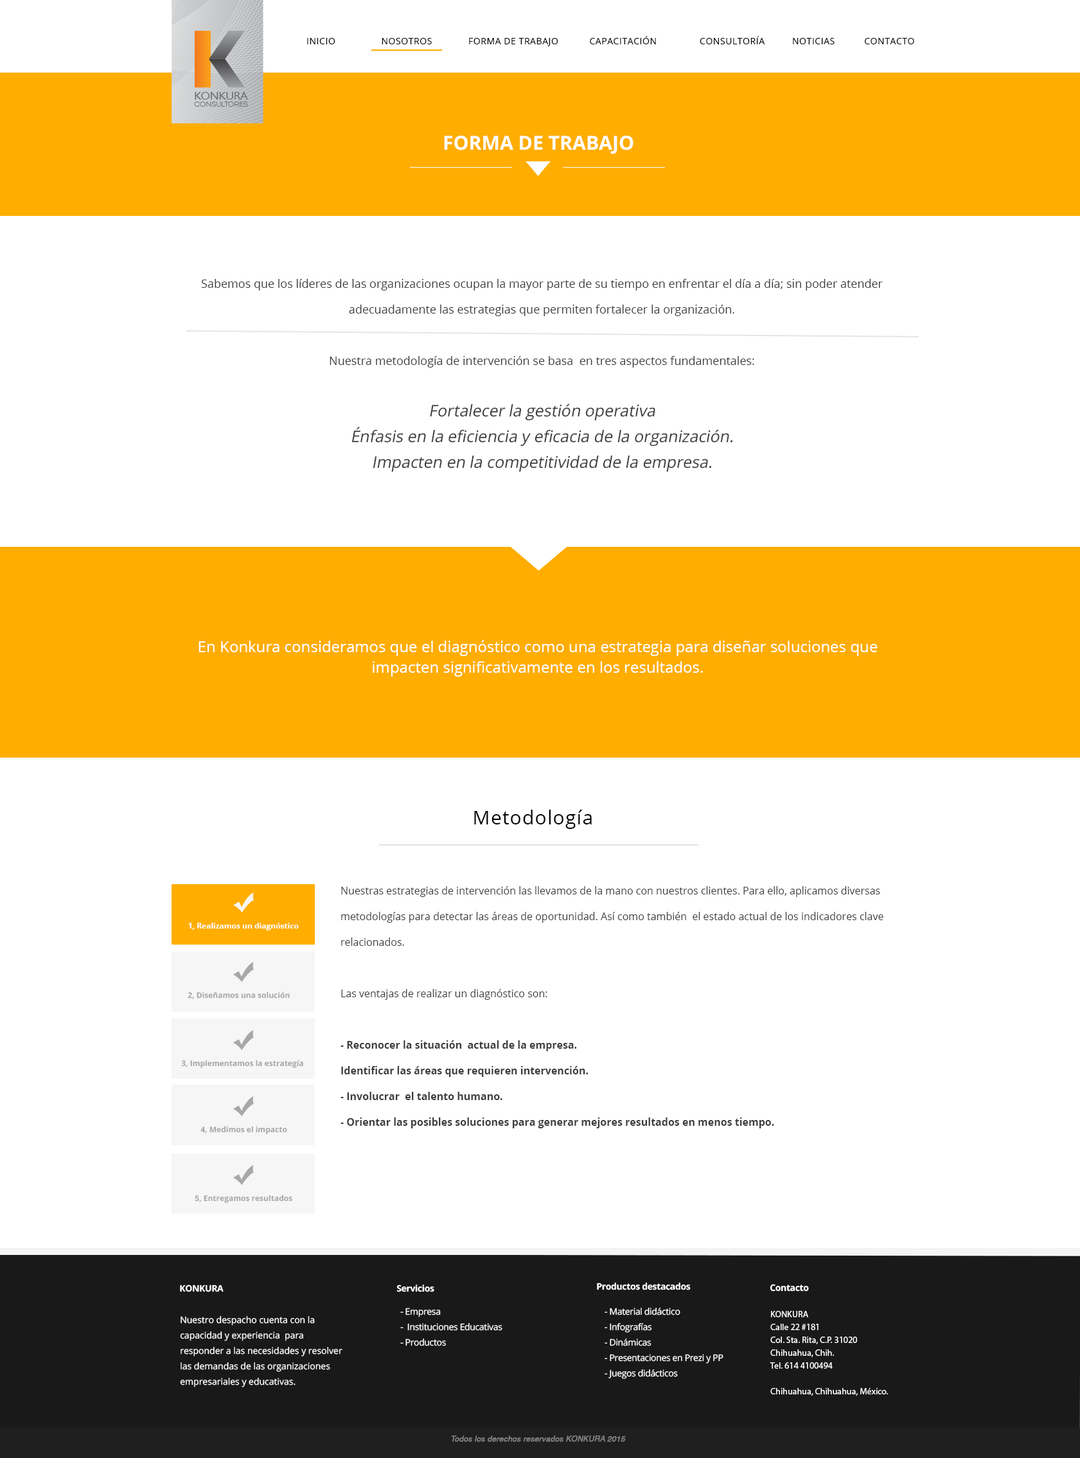
<style>
.page{position:relative;width:1080px;height:1458px;background:#ffffff}
.page>*{position:absolute;margin:0}
.t1{font:9px "OpenSans";letter-spacing:0.04em;color:#000000}
.t2{font:19.3px "OpenSans-Bold";color:#ffffff}
.t3{font:11.6px/25.7px "OpenSans";color:#3e3e3e}
.t4{font:16.1px/25.7px "OpenSans";color:#3e3e3e;font-style:italic}
.t5{font:15.4px/20.4px "OpenSans";color:#ffffff}
.t6{font:19.3px "OpenSans";letter-spacing:0.04em;color:#000000}
.t7{font:10.3px/25.7px "OpenSans";color:#3e3e3e}
.t8{font:10.3px/25.7px "OpenSans-Bold";color:#3e3e3e}
.t9{font:7.7px "OpenSans-Bold";color:#ffffff}
.t10{font:7.8px "OpenSans-Bold";color:#a8a8a8}
.t11{font:9px "OpenSans-Bold";letter-spacing:-0.025em;color:#ffffff}
.t12{font:9px/15.4px "OpenSans";letter-spacing:-0.025em;color:#ffffff}
.t13{font:9px/12.9px "MyriadPro-Regular";color:#ffffff}
.t14{font:9px/15.4px "OpenSans";color:#ffffff}
.t15{font:7.7px "Helvetica-Oblique";color:#818181;font-weight:bold}
</style>
<div class="page">
<p class="t1" style="left:307px;top:36px;width:607px;height:10px">INICIO       NOSOTROS  FORMA DE TRABAJO    CAPACITACIÓN  CONSULTORÍA   NOTICIAS   CONTACTO</p>
<p class="t2" style="left:444px;top:136px;width:190px;height:18px">FORMA DE TRABAJO</p>
<p class="t3" style="left:201px;top:279px;width:682px;height:193px;text-align:center">Sabemos que los líderes de las organizaciones ocupan la mayor parte de su tiempo en enfrentar el día a día; sin poder atender adecuadamente las estrategias que permiten fortalecer la organización.<br><br>Nuestra metodología de intervención se basa  en tres aspectos fundamentales:<br><br><span class="t4">Fortalecer la gestión operativa<br>Énfasis en la eficiencia y eficacia de la organización.<br>Impacten en la competitividad de la empresa.</span></p>
<p class="t5" style="left:199px;top:640px;width:679px;height:37px;text-align:center">En Konkura consideramos que el diagnóstico como una estrategia para diseñar soluciones que impacten significativamente en los resultados.</p>
<p class="t6" style="left:474px;top:810px;width:118px;height:19px">Metodología</p>
<p class="t7" style="left:341px;top:886px;width:543px;height:242px">Nuestras estrategias de intervención las llevamos de la mano con nuestros clientes. Para ello, aplicamos diversas metodologías para detectar las áreas de oportunidad. Así como también  el estado actual de los indicadores clave relacionados. <br><br>Las ventajas de realizar un diagnóstico son:<br><br><span class="t8">- Reconocer la situación  actual de la empresa.<br>Identificar las áreas que requieren intervención.<br>- Involucrar  el talento humano.<br>- Orientar las posibles soluciones para generar mejores resultados en menos tiempo.</span></p>
<p class="t9" style="left:188px;top:923px;width:111px;height:7px">1, Realizamos un diagnóstico</p>
<p class="t10" style="left:188px;top:991px;width:102px;height:8px">2, Diseñamos una solución</p>
<p class="t10" style="left:181px;top:1060px;width:122px;height:9px">3, Implementamos la estrategía</p>
<p class="t10" style="left:200px;top:1126px;width:87px;height:9px">4, Medimos el impacto</p>
<p class="t10" style="left:195px;top:1195px;width:97px;height:8px">5, Entregamos resultados</p>
<p class="t11" style="left:180px;top:1284px;width:44px;height:8px">KONKURA</p>
<p class="t11" style="left:396px;top:1284px;width:38px;height:8px">Servicios</p>
<p class="t11" style="left:597px;top:1283px;width:94px;height:7px">Productos destacados</p>
<p class="t11" style="left:770px;top:1284px;width:39px;height:8px">Contacto</p>
<p class="t12" style="left:400px;top:1308px;width:102px;height:38px">- Empresa<br>-  Instituciones Educativas<br>- Productos</p>
<p class="t12" style="left:605px;top:1308px;width:119px;height:71px">- Material didáctico<br>- Infografías<br>- Dinámicas<br>- Presentaciones en Prezi y PP<br>- Juegos didácticos</p>
<p class="t13" style="left:770px;top:1311px;width:118px;height:85px">KONKURA<br>Calle 22 #181<br>Col. Sta. Rita, C.P. 31020<br>Chihuahua, Chih.<br>Tel. 614 4100494<br><br>Chihuahua, Chihuahua, México.</p>
<p class="t14" style="left:180px;top:1316px;width:162px;height:71px">Nuestro despacho cuenta con la capacidad y experiencia  para responder a las necesidades y resolver las demandas de las organizaciones empresariales y educativas.</p>
<p class="t15" style="left:451px;top:1435px;width:175px;height:7px">Todos los derechos reservados KONKURA 2015</p>
</div>
